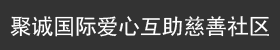
<style>
.page{position:relative;width:280px;height:50px;background:#333333}
.page>*{position:absolute;margin:0}
.t1{font:21.7px "SimHei";color:#ffffff}
</style>
<div class="page">
<p class="t1" style="left:10px;top:16px;width:259px;height:21px">聚诚国际爱心互助慈善社区</p>
</div>
